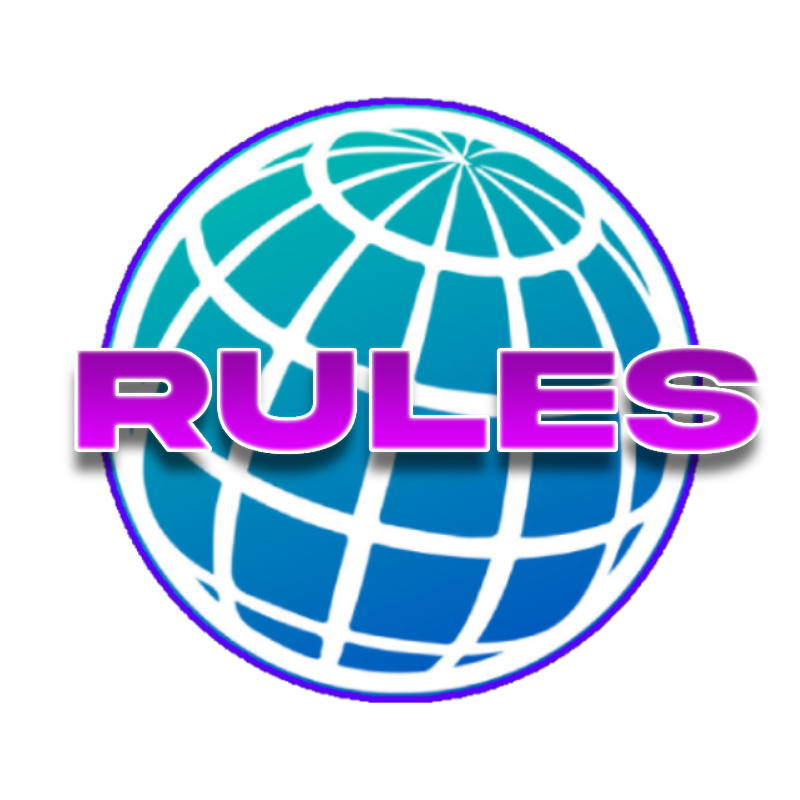
<style>
.page{position:relative;width:800px;height:800px;background:#ffffff}
.page>*{position:absolute;margin:0}
.t1{font:150px "AkiraExpanded-SuperBold"}
</style>
<div class="page">
<p class="t1" style="left:77px;top:348px;width:683px;height:104px">RULES</p>
</div>
